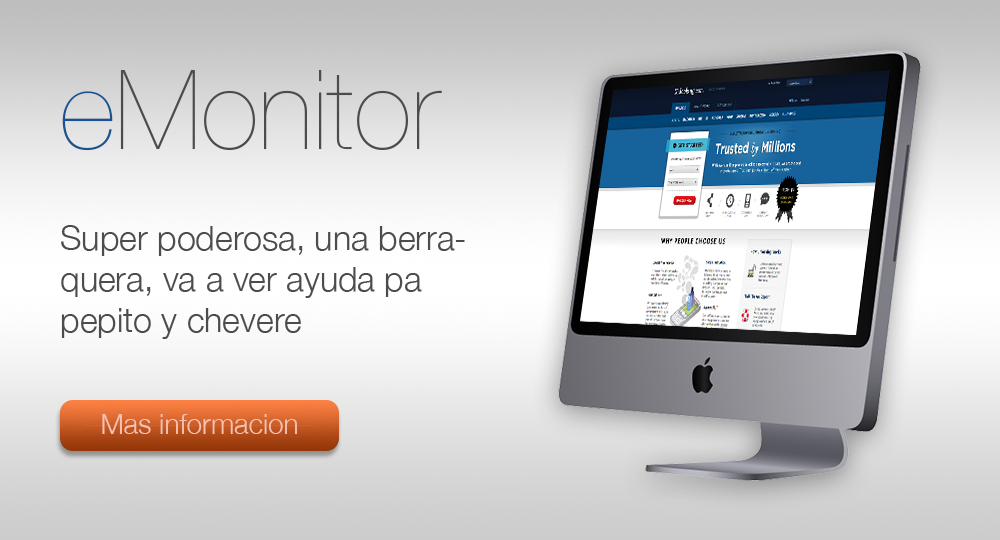
<style>
.page{position:relative;width:1000px;height:540px}
.page>*{position:absolute;margin:0}
.t1{font:110px "HelveticaNeue-UltraLight";color:#4c4c4c}
.t2{font:110px "HelveticaNeue-UltraLight";color:#1c5290}
.t3{font:34px "HelveticaNeue-Light";color:#4c4c4c}
.t4{font:28px "HelveticaNeue-Light";color:#f6c2b2}
</style>
<div class="page">
<p class="t1" style="left:62px;top:70px;width:380px;height:81px"><span class="t2">e</span>Monitor</p>
<p class="t3" style="left:61px;top:225px;width:404px;height:114px">Super poderosa, una berraquera, va a ver ayuda pa pepito y chevere</p>
<p class="t4" style="left:102px;top:414px;width:195px;height:20px">Mas informacion</p>
</div>
